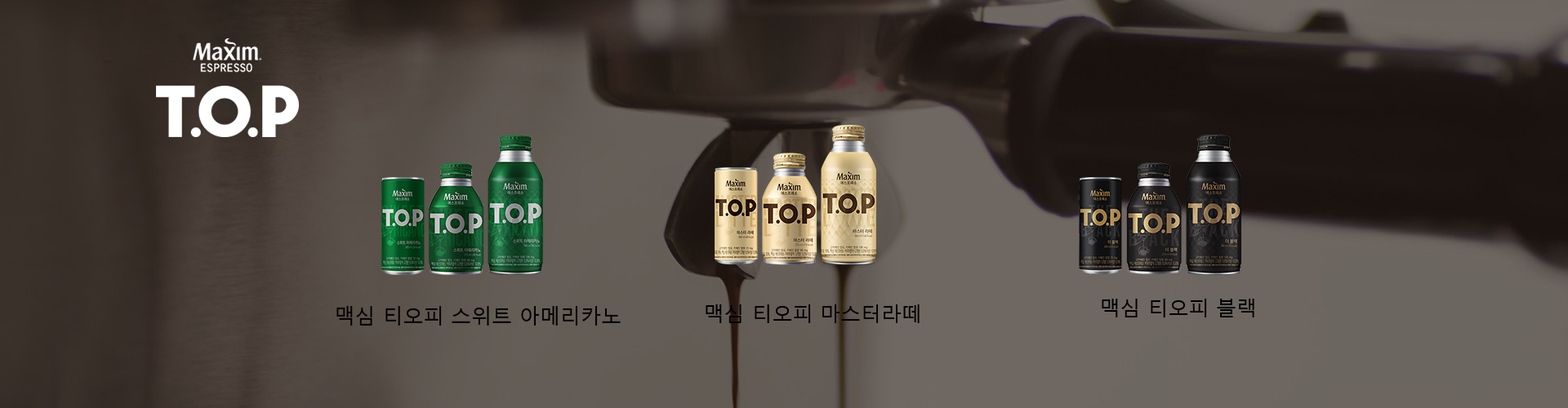
<style>
.page{position:relative;width:1568px;height:408px}
.page>*{position:absolute;margin:0}
.t1{font:20.3px "MalgunGothicRegular";color:#000000}
</style>
<div class="page">
<p class="t1" style="left:706px;top:305px;width:214px;height:18px">맥심 티오피 마스터라떼</p>
<p class="t1" style="left:1102px;top:299px;width:152px;height:19px">맥심 티오피 블랙</p>
<p class="t1" style="left:336px;top:306px;width:285px;height:20px">맥심 티오피 스위트 아메리카노</p>
</div>
